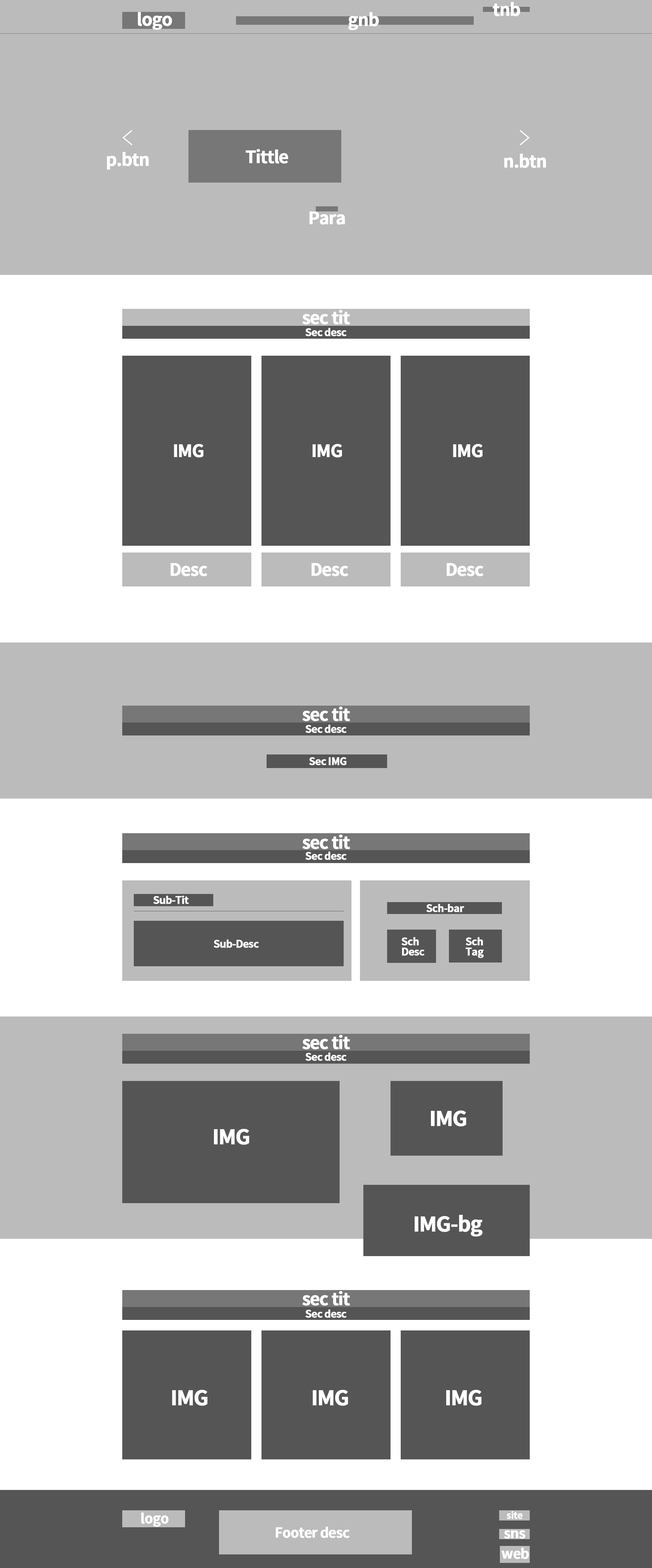
<style>
.page{position:relative;width:652px;height:1568px;background:#bbbbbb}
.page>*{position:absolute;margin:0}
.t1{font:17px "NotoSansKR-Bold";letter-spacing:-0.05em;color:#ffffff;font-weight:bold}
.t2{font:10.2px "NotoSansKR-Bold";letter-spacing:-0.05em;color:#ffffff;font-weight:bold}
.t3{font:10.2px/10.2px "NotoSansKR-Bold";letter-spacing:-0.05em;color:#ffffff;font-weight:bold}
.t4{font:20.4px "NotoSansKR-Bold";letter-spacing:-0.05em;color:#ffffff;font-weight:bold}
.t5{font:13.6px "NotoSansKR-Bold";letter-spacing:-0.05em;color:#ffffff;font-weight:bold}
.t6{font:9.5px "NotoSansKR-Bold";letter-spacing:-0.05em;color:#ffffff;font-weight:bold}
</style>
<div class="page">
<p class="t1" style="left:492px;top:2px;width:28px;height:14px">tnb</p>
<p class="t1" style="left:138px;top:12px;width:34px;height:18px">logo</p>
<p class="t1" style="left:348px;top:12px;width:31px;height:18px">gnb</p>
<p class="t1" style="left:245px;top:149px;width:43px;height:15px">Tittle</p>
<p class="t1" style="left:107px;top:152px;width:42px;height:18px">p.btn</p>
<p class="t1" style="left:504px;top:153px;width:42px;height:15px">n.btn</p>
<p class="t1" style="left:309px;top:211px;width:36px;height:14px">Para</p>
<p class="t1" style="left:302px;top:310px;width:48px;height:14px">sec tit</p>
<p class="t2" style="left:305px;top:328px;width:42px;height:8px">Sec desc</p>
<p class="t1" style="left:174px;top:444px;width:29px;height:14px">IMG</p>
<p class="t1" style="left:312px;top:444px;width:30px;height:14px">IMG</p>
<p class="t1" style="left:453px;top:444px;width:29px;height:14px">IMG</p>
<p class="t1" style="left:170px;top:563px;width:37px;height:13px">Desc</p>
<p class="t1" style="left:311px;top:563px;width:37px;height:13px">Desc</p>
<p class="t1" style="left:446px;top:563px;width:37px;height:13px">Desc</p>
<p class="t1" style="left:302px;top:707px;width:48px;height:14px">sec tit</p>
<p class="t2" style="left:305px;top:725px;width:42px;height:8px">Sec desc</p>
<p class="t2" style="left:309px;top:757px;width:37px;height:8px">Sec IMG</p>
<p class="t1" style="left:302px;top:835px;width:48px;height:14px">sec tit</p>
<p class="t2" style="left:305px;top:852px;width:42px;height:8px">Sec desc</p>
<p class="t2" style="left:153px;top:896px;width:36px;height:8px">Sub-Tit</p>
<p class="t2" style="left:426px;top:904px;width:38px;height:8px">Sch-bar</p>
<p class="t2" style="left:213px;top:939px;width:46px;height:9px">Sub-Desc</p>
<p class="t3" style="left:401px;top:937px;width:23px;height:19px">Sch<br>Desc</p>
<p class="t3" style="left:465px;top:937px;width:19px;height:21px">Sch<br>Tag</p>
<p class="t1" style="left:302px;top:1035px;width:48px;height:14px">sec tit</p>
<p class="t2" style="left:305px;top:1052px;width:42px;height:9px">Sec desc</p>
<p class="t4" style="left:431px;top:1110px;width:35px;height:16px">IMG</p>
<p class="t4" style="left:214px;top:1129px;width:35px;height:16px">IMG</p>
<p class="t4" style="left:414px;top:1215px;width:68px;height:22px">IMG-bg</p>
<p class="t1" style="left:302px;top:1291px;width:48px;height:15px">sec tit</p>
<p class="t2" style="left:305px;top:1309px;width:42px;height:9px">Sec desc</p>
<p class="t4" style="left:172px;top:1390px;width:35px;height:16px">IMG</p>
<p class="t4" style="left:313px;top:1390px;width:35px;height:16px">IMG</p>
<p class="t4" style="left:446px;top:1390px;width:35px;height:16px">IMG</p>
<p class="t5" style="left:141px;top:1512px;width:28px;height:15px">logo</p>
<p class="t6" style="left:506px;top:1511px;width:16px;height:8px">site</p>
<p class="t5" style="left:276px;top:1527px;width:74px;height:11px">Footer desc</p>
<p class="t5" style="left:504px;top:1530px;width:21px;height:9px">sns</p>
<p class="t5" style="left:501px;top:1548px;width:28px;height:11px">web</p>
</div>
